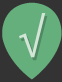
<style>
.page{position:relative;width:62px;height:82px;background:#65af7d}
.page>*{position:absolute;margin:0}
.t1{font:48px "MyriadPro-Regular";color:#d2e5d7}
</style>
<div class="page">
<p class="t1" style="left:19px;top:13px;width:27px;height:45px">√</p>
</div>
